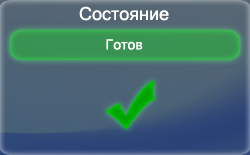
<style>
.page{position:relative;width:250px;height:155px}
.page>*{position:absolute;margin:0}
.t1{font:18px "MicrosoftSansSerif";color:#ffffff}
.t2{font:14px "MicrosoftSansSerif";color:#ffffff}
</style>
<div class="page">
<p class="t1" style="left:79px;top:6px;width:90px;height:15px">Состояние</p>
<p class="t2" style="left:106px;top:39px;width:37px;height:11px">Готов</p>
</div>
